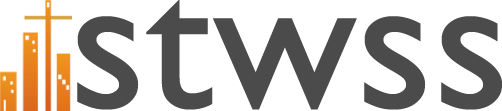
<style>
.page{position:relative;width:502px;height:111px;background:#ffffff}
.page>*{position:absolute;margin:0}
.t1{font:200px "GillSans";color:#4b4b4b}
</style>
<div class="page">
<p class="t1" style="left:77px;top:0px;width:426px;height:110px">stwss</p>
</div>
